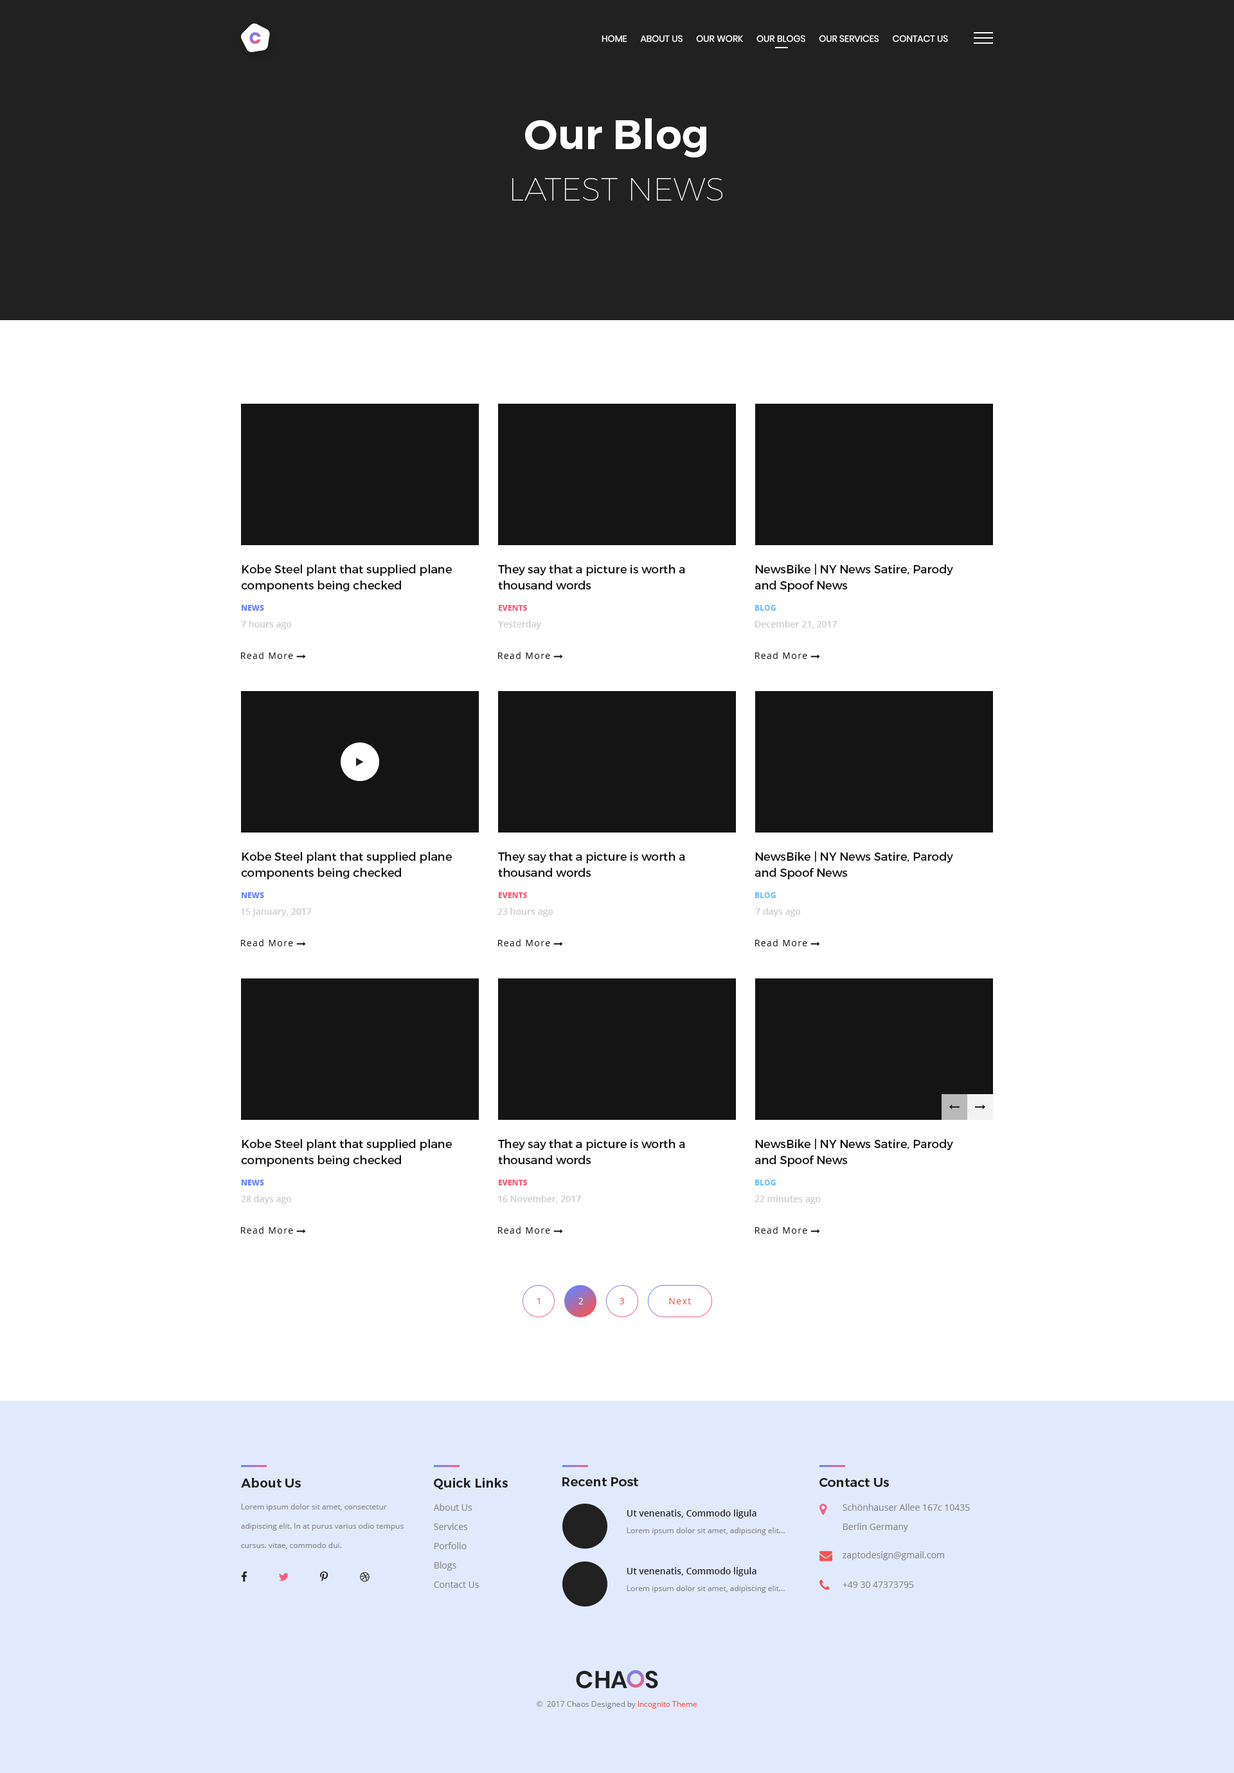
<style>
.page{position:relative;width:1234px;height:1773px;background:#ffffff}
.page>*{position:absolute;margin:0}
.t1{font:16.1px "Poppins-ExtraBold";text-transform:uppercase}
.t2{font:9px "Poppins-Regular";color:#ffffff;text-transform:uppercase}
.t3{font:32.1px/51.4px "Montserrat-Hairline";color:#ffffff;text-transform:uppercase}
.t4{font:41.8px/51.4px "Montserrat-SemiBold";color:#ffffff}
.t5{font:11.6px/16.1px "Montserrat-Regular";color:#141414}
.t6{font:7.7px "OpenSans-ExtraBold";color:#6a82fb;text-transform:uppercase}
.t7{font:7.7px "OpenSans-ExtraBold";color:#fc5c7d;text-transform:uppercase}
.t8{font:7.7px "OpenSans-ExtraBold";color:#72c3fc;text-transform:uppercase}
.t9{font:9px "OpenSans-Semibold";color:#cccccc}
.t10{font:9px "OpenSans";letter-spacing:0.1em;color:#141414}
.t11{font:9px "OpenSans";letter-spacing:0.1em;color:#f45551}
.t12{font:9px "OpenSans";letter-spacing:0.1em;color:#ffffff}
.t13{font:12.9px "Montserrat-SemiBold";color:#212121}
.t14{font:7.7px/19.3px "OpenSans";color:#888888}
.t15{font:9px/19.3px "OpenSans";color:#888888}
.t16{font:9px "OpenSans-Semibold";color:#212121}
.t17{font:7.7px "OpenSans";color:#888888}
.t18{font:9px "OpenSans";color:#888888}
.t19{font:24.3px "Poppins-SemiBold";color:#212121;text-transform:uppercase}
.t20{font:7.7px "OpenSans";color:#f45551}
</style>
<div class="page">
<p class="t1" style="left:249px;top:32px;width:12px;height:12px">C</p>
<p class="t2" style="left:602px;top:35px;width:346px;height:7px">HOME      ABOUT US      Our Work      OUR BLOGS      Our SERVICES      CONTACT US</p>
<p class="t3" style="left:512px;top:118px;width:211px;height:83px;text-align:center"><span class="t4">Our Blog<br></span>Latest News</p>
<p class="t5" style="left:241px;top:564px;width:211px;height:28px">Kobe Steel plant that supplied plane <br>components being checked</p>
<p class="t5" style="left:498px;top:564px;width:187px;height:26px">They say that a picture is worth a <br>thousand words</p>
<p class="t5" style="left:755px;top:564px;width:198px;height:28px">NewsBike | NY News Satire, Parody<br>and Spoof News</p>
<p class="t6" style="left:241px;top:605px;width:23px;height:6px">News</p>
<p class="t7" style="left:498px;top:605px;width:29px;height:6px">Events</p>
<p class="t8" style="left:755px;top:605px;width:21px;height:6px">Blog</p>
<p class="t9" style="left:241px;top:620px;width:51px;height:9px">7 hours ago</p>
<p class="t9" style="left:498px;top:620px;width:43px;height:9px">Yesterday</p>
<p class="t9" style="left:755px;top:620px;width:82px;height:9px">December 21, 2017</p>
<p class="t10" style="left:241px;top:652px;width:52px;height:7px">Read More</p>
<p class="t10" style="left:498px;top:652px;width:52px;height:7px">Read More</p>
<p class="t10" style="left:755px;top:652px;width:52px;height:7px">Read More</p>
<p class="t5" style="left:241px;top:852px;width:211px;height:27px">Kobe Steel plant that supplied plane <br>components being checked</p>
<p class="t5" style="left:498px;top:852px;width:187px;height:25px">They say that a picture is worth a <br>thousand words</p>
<p class="t5" style="left:755px;top:851px;width:198px;height:28px">NewsBike | NY News Satire, Parody<br>and Spoof News</p>
<p class="t6" style="left:241px;top:892px;width:23px;height:6px">News</p>
<p class="t7" style="left:498px;top:892px;width:29px;height:6px">Events</p>
<p class="t8" style="left:755px;top:892px;width:21px;height:6px">Blog</p>
<p class="t9" style="left:241px;top:908px;width:71px;height:9px">15 January, 2017</p>
<p class="t9" style="left:498px;top:908px;width:56px;height:9px">23 hours ago</p>
<p class="t9" style="left:755px;top:908px;width:46px;height:9px">7 days ago</p>
<p class="t10" style="left:241px;top:939px;width:52px;height:7px">Read More</p>
<p class="t10" style="left:498px;top:939px;width:52px;height:7px">Read More</p>
<p class="t10" style="left:755px;top:939px;width:52px;height:7px">Read More</p>
<p class="t5" style="left:241px;top:1139px;width:211px;height:28px">Kobe Steel plant that supplied plane <br>components being checked</p>
<p class="t5" style="left:498px;top:1139px;width:187px;height:25px">They say that a picture is worth a <br>thousand words</p>
<p class="t5" style="left:755px;top:1138px;width:198px;height:29px">NewsBike | NY News Satire, Parody<br>and Spoof News</p>
<p class="t6" style="left:241px;top:1180px;width:23px;height:5px">News</p>
<p class="t7" style="left:498px;top:1180px;width:29px;height:5px">Events</p>
<p class="t8" style="left:755px;top:1180px;width:21px;height:5px">Blog</p>
<p class="t9" style="left:241px;top:1195px;width:51px;height:9px">28 days ago</p>
<p class="t9" style="left:498px;top:1195px;width:83px;height:8px">16 November, 2017</p>
<p class="t9" style="left:755px;top:1195px;width:66px;height:9px">22 minutes ago</p>
<p class="t10" style="left:241px;top:1227px;width:52px;height:7px">Read More</p>
<p class="t10" style="left:498px;top:1227px;width:52px;height:7px">Read More</p>
<p class="t10" style="left:755px;top:1227px;width:52px;height:7px">Read More</p>
<p class="t11" style="left:537px;top:1298px;width:3px;height:6px">1</p>
<p class="t12" style="left:579px;top:1298px;width:5px;height:6px">2</p>
<p class="t11" style="left:620px;top:1298px;width:4px;height:6px">3</p>
<p class="t11" style="left:669px;top:1298px;width:22px;height:6px">Next</p>
<p class="t13" style="left:241px;top:1478px;width:60px;height:10px">About Us</p>
<p class="t13" style="left:434px;top:1477px;width:74px;height:13px">Quick Links</p>
<p class="t13" style="left:562px;top:1477px;width:76px;height:9px">Recent Post</p>
<p class="t13" style="left:820px;top:1478px;width:69px;height:9px">Contact Us</p>
<p class="t14" style="left:241px;top:1504px;width:163px;height:45px">Lorem ipsum dolor sit amet, consectetur adipiscing elit. In at purus varius odio tempus cursus. vitae, commodo dui.</p>
<p class="t15" style="left:433px;top:1504px;width:46px;height:84px">About Us<br>Services<br>Porfolio<br>Blogs<br>Contact Us</p>
<p class="t15" style="left:843px;top:1504px;width:127px;height:28px">Schönhauser Allee 167c 10435 <br>Berlin Germany</p>
<p class="t16" style="left:627px;top:1509px;width:130px;height:9px">Ut venenatis, Commodo ligula</p>
<p class="t17" style="left:627px;top:1527px;width:158px;height:8px">Lorem ipsum dolor sit amet, adipiscing elit...</p>
<p class="t18" style="left:843px;top:1551px;width:101px;height:9px">zaptodesign@gmail.com</p>
<p class="t16" style="left:627px;top:1567px;width:130px;height:9px">Ut venenatis, Commodo ligula</p>
<p class="t17" style="left:627px;top:1585px;width:158px;height:8px">Lorem ipsum dolor sit amet, adipiscing elit...</p>
<p class="t18" style="left:843px;top:1581px;width:71px;height:7px">+49 30 47373795</p>
<p class="t19" style="left:576px;top:1671px;width:82px;height:18px">Cha s</p>
<p class="t17" style="left:537px;top:1701px;width:160px;height:8px">©  2017 Chaos Designed by <span class="t20">Incognito Theme</span></p>
</div>
